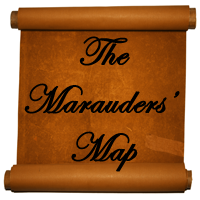
<style>
.page{position:relative;width:200px;height:200px}
.page>*{position:absolute;margin:0}
.t1{font:40px "EdwardianScriptITC";color:#000000;font-weight:bold}
</style>
<div class="page">
<p class="t1" style="left:24px;top:36px;width:156px;height:136px;text-align:center">The<br>Marauders’ <br>Map</p>
</div>
